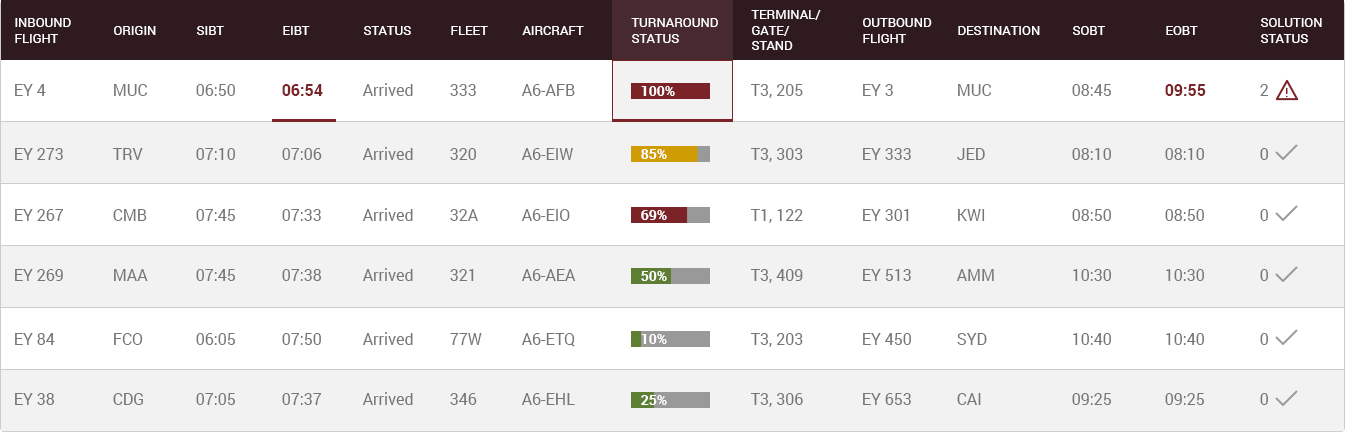
<style>
.page{position:relative;width:1345px;height:432px;background:#f2f2f2}
.page>*{position:absolute;margin:0}
.t1{font:13px "Roboto-Regular";color:#ffffff;text-transform:uppercase}
.t2{font:16px "Roboto-Regular";color:#767676}
.t3{font:16px "Roboto-Bold";color:#7b2326}
.t4{font:14px "Roboto-Bold";color:#fefefe}
</style>
<div class="page">
<p class="t1" style="left:751px;top:10px;width:70px;height:40px">Terminal/<br>Gate/<br>Stand</p>
<p class="t1" style="left:15px;top:18px;width:56px;height:25px">Inbound<br>Flight</p>
<p class="t1" style="left:114px;top:26px;width:42px;height:9px">Origin</p>
<p class="t1" style="left:197px;top:26px;width:27px;height:9px">SIBT</p>
<p class="t1" style="left:283px;top:26px;width:27px;height:9px">EIBT</p>
<p class="t1" style="left:364px;top:26px;width:47px;height:9px">Status</p>
<p class="t1" style="left:451px;top:26px;width:37px;height:9px">Fleet</p>
<p class="t1" style="left:522px;top:26px;width:62px;height:9px">AirCraft</p>
<p class="t1" style="left:631px;top:18px;width:87px;height:25px">Turnaround<br>Status</p>
<p class="t1" style="left:863px;top:18px;width:69px;height:25px">Outbound<br>Flight</p>
<p class="t1" style="left:958px;top:26px;width:82px;height:9px">DESTination</p>
<p class="t1" style="left:1073px;top:26px;width:32px;height:9px">SOBT</p>
<p class="t1" style="left:1166px;top:26px;width:32px;height:9px">EOBT</p>
<p class="t1" style="left:1261px;top:18px;width:61px;height:25px">Solution<br>Status</p>
<p class="t2" style="left:15px;top:84px;width:31px;height:12px">EY 4</p>
<p class="t2" style="left:114px;top:84px;width:33px;height:12px">MUC</p>
<p class="t2" style="left:196px;top:84px;width:39px;height:12px">06:50</p>
<p class="t3" style="left:282px;top:84px;width:41px;height:12px">06:54</p>
<p class="t2" style="left:362px;top:83px;width:51px;height:13px">Arrived</p>
<p class="t2" style="left:450px;top:84px;width:26px;height:12px">333</p>
<p class="t2" style="left:521px;top:84px;width:54px;height:12px">A6-AFB</p>
<p class="t4" style="left:641px;top:86px;width:34px;height:10px">100%</p>
<p class="t2" style="left:750px;top:84px;width:53px;height:14px">T3, 205</p>
<p class="t2" style="left:863px;top:84px;width:30px;height:12px">EY 3</p>
<p class="t2" style="left:958px;top:84px;width:33px;height:12px">MUC</p>
<p class="t2" style="left:1072px;top:84px;width:39px;height:12px">08:45</p>
<p class="t3" style="left:1165px;top:84px;width:41px;height:12px">09:55</p>
<p class="t2" style="left:1260px;top:84px;width:9px;height:12px">2</p>
<p class="t2" style="left:15px;top:148px;width:48px;height:12px">EY 273</p>
<p class="t2" style="left:112px;top:148px;width:31px;height:12px">TRV</p>
<p class="t2" style="left:196px;top:148px;width:39px;height:12px">07:10</p>
<p class="t2" style="left:282px;top:148px;width:40px;height:12px">07:06</p>
<p class="t2" style="left:362px;top:147px;width:51px;height:13px">Arrived</p>
<p class="t2" style="left:450px;top:148px;width:26px;height:12px">320</p>
<p class="t2" style="left:521px;top:148px;width:52px;height:12px">A6-EIW</p>
<p class="t4" style="left:641px;top:149px;width:26px;height:10px">85%</p>
<p class="t2" style="left:750px;top:148px;width:53px;height:14px">T3, 303</p>
<p class="t2" style="left:863px;top:148px;width:48px;height:12px">EY 333</p>
<p class="t2" style="left:957px;top:148px;width:28px;height:12px">JED</p>
<p class="t2" style="left:1072px;top:148px;width:39px;height:12px">08:10</p>
<p class="t2" style="left:1165px;top:148px;width:39px;height:12px">08:10</p>
<p class="t2" style="left:1260px;top:148px;width:8px;height:12px">0</p>
<p class="t2" style="left:15px;top:209px;width:49px;height:12px">EY 267</p>
<p class="t2" style="left:113px;top:209px;width:34px;height:12px">CMB</p>
<p class="t2" style="left:196px;top:209px;width:39px;height:12px">07:45</p>
<p class="t2" style="left:282px;top:209px;width:39px;height:12px">07:33</p>
<p class="t2" style="left:362px;top:208px;width:51px;height:13px">Arrived</p>
<p class="t2" style="left:450px;top:209px;width:28px;height:12px">32A</p>
<p class="t2" style="left:521px;top:209px;width:49px;height:12px">A6-EIO</p>
<p class="t2" style="left:750px;top:209px;width:53px;height:14px">T1, 122</p>
<p class="t2" style="left:863px;top:209px;width:46px;height:12px">EY 301</p>
<p class="t2" style="left:958px;top:209px;width:27px;height:12px">KWI</p>
<p class="t2" style="left:1072px;top:209px;width:39px;height:12px">08:50</p>
<p class="t2" style="left:1165px;top:209px;width:39px;height:12px">08:50</p>
<p class="t2" style="left:1260px;top:209px;width:8px;height:12px">0</p>
<p class="t4" style="left:641px;top:210px;width:26px;height:10px">69%</p>
<p class="t2" style="left:15px;top:269px;width:48px;height:12px">EY 269</p>
<p class="t2" style="left:114px;top:269px;width:34px;height:12px">MAA</p>
<p class="t2" style="left:196px;top:269px;width:39px;height:12px">07:45</p>
<p class="t2" style="left:282px;top:269px;width:40px;height:12px">07:38</p>
<p class="t2" style="left:362px;top:268px;width:51px;height:13px">Arrived</p>
<p class="t2" style="left:450px;top:269px;width:24px;height:12px">321</p>
<p class="t2" style="left:521px;top:269px;width:55px;height:12px">A6-AEA</p>
<p class="t2" style="left:750px;top:269px;width:53px;height:14px">T3, 409</p>
<p class="t2" style="left:863px;top:269px;width:48px;height:12px">EY 513</p>
<p class="t2" style="left:956px;top:269px;width:38px;height:12px">AMM</p>
<p class="t2" style="left:1073px;top:269px;width:38px;height:12px">10:30</p>
<p class="t2" style="left:1166px;top:269px;width:38px;height:12px">10:30</p>
<p class="t2" style="left:1260px;top:269px;width:8px;height:12px">0</p>
<p class="t4" style="left:641px;top:271px;width:26px;height:10px">50%</p>
<p class="t2" style="left:15px;top:333px;width:40px;height:12px">EY 84</p>
<p class="t2" style="left:114px;top:333px;width:29px;height:12px">FCO</p>
<p class="t2" style="left:196px;top:333px;width:39px;height:12px">06:05</p>
<p class="t2" style="left:282px;top:333px;width:39px;height:12px">07:50</p>
<p class="t2" style="left:362px;top:332px;width:51px;height:13px">Arrived</p>
<p class="t2" style="left:450px;top:333px;width:32px;height:12px">77W</p>
<p class="t2" style="left:521px;top:333px;width:54px;height:14px">A6-ETQ</p>
<p class="t4" style="left:641px;top:334px;width:26px;height:10px">10%</p>
<p class="t2" style="left:750px;top:333px;width:53px;height:14px">T3, 203</p>
<p class="t2" style="left:863px;top:333px;width:48px;height:12px">EY 450</p>
<p class="t2" style="left:957px;top:333px;width:30px;height:12px">SYD</p>
<p class="t2" style="left:1073px;top:333px;width:38px;height:12px">10:40</p>
<p class="t2" style="left:1166px;top:333px;width:38px;height:12px">10:40</p>
<p class="t2" style="left:1260px;top:333px;width:8px;height:12px">0</p>
<p class="t2" style="left:15px;top:393px;width:40px;height:12px">EY 38</p>
<p class="t2" style="left:113px;top:393px;width:30px;height:12px">CDG</p>
<p class="t2" style="left:196px;top:393px;width:39px;height:12px">07:05</p>
<p class="t2" style="left:282px;top:393px;width:40px;height:12px">07:37</p>
<p class="t2" style="left:362px;top:392px;width:51px;height:13px">Arrived</p>
<p class="t2" style="left:450px;top:393px;width:27px;height:12px">346</p>
<p class="t2" style="left:521px;top:393px;width:54px;height:12px">A6-EHL</p>
<p class="t4" style="left:641px;top:395px;width:26px;height:10px">25%</p>
<p class="t2" style="left:750px;top:393px;width:53px;height:14px">T3, 306</p>
<p class="t2" style="left:863px;top:393px;width:48px;height:12px">EY 653</p>
<p class="t2" style="left:957px;top:393px;width:24px;height:12px">CAI</p>
<p class="t2" style="left:1072px;top:393px;width:39px;height:12px">09:25</p>
<p class="t2" style="left:1165px;top:393px;width:39px;height:12px">09:25</p>
<p class="t2" style="left:1260px;top:393px;width:8px;height:12px">0</p>
</div>
